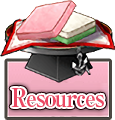
<style>
.page{position:relative;width:115px;height:120px;background:#ffffff}
.page>*{position:absolute;margin:0}
.t1{font:25px "RyuminPro-ExBold";letter-spacing:-0.08em;color:#eb4964;scale:0.9 1}
</style>
<div class="page">
<p class="t1" style="left:11px;top:88px;width:93px;height:20px">Resources</p>
</div>
